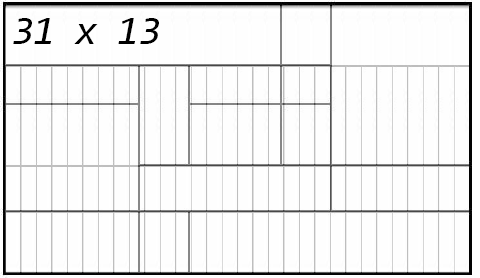
<style>
.page{position:relative;width:480px;height:278px;background:#fefefe}
.page>*{position:absolute;margin:0}
.t1{font:40px "Consolas-Italic";letter-spacing:-0.02em;color:#000000}
</style>
<div class="page">
<p class="t1" style="left:13px;top:18px;width:146px;height:26px">31 x 13</p>
</div>
